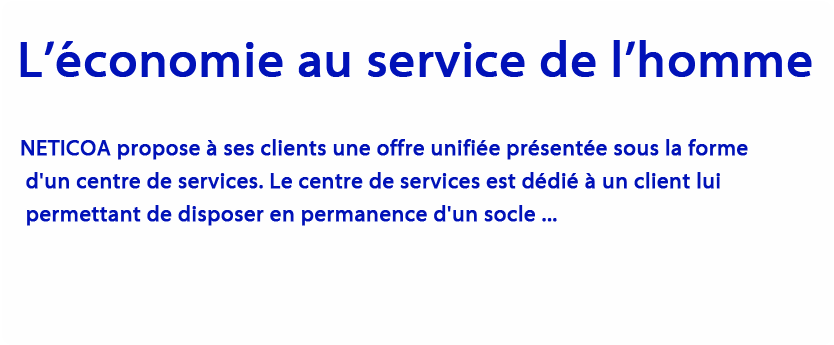
<style>
.page{position:relative;width:834px;height:345px;background:#fefefe}
.page>*{position:absolute;margin:0}
.t1{font:50px "Myriad-Web";letter-spacing:0.005em;color:#0112b8;font-weight:bold}
.t2{font:22px/33.1px "Myriad-Web";letter-spacing:0.005em;color:#0112b8;font-weight:bold}
</style>
<div class="page">
<p class="t1" style="left:20px;top:40px;width:792px;height:37px">L’économie au service de l’homme</p>
<p class="t2" style="left:21px;top:139px;width:727px;height:87px">NETICOA propose à ses clients une offre unifiée présentée sous la forme<br> d'un centre de services. Le centre de services est dédié à un client lui<br> permettant de disposer en permanence d'un socle ...</p>
</div>
